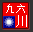
<style>
.page{position:relative;width:33px;height:32px;background:#f20000}
.page>*{position:absolute;margin:0}
.t1{font:10.4px "SimSun";color:#ffffff}
.t2{font:11.7px "SimSun";color:#ffffff}
</style>
<div class="page">
<p class="t1" style="left:6px;top:4px;width:19px;height:9px">九六</p>
<p class="t2" style="left:16px;top:15px;width:11px;height:12px">川</p>
</div>
